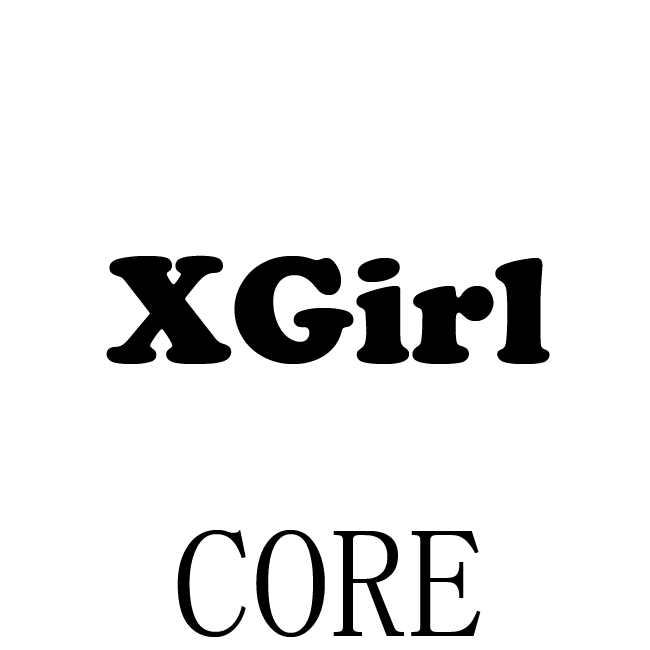
<style>
.page{position:relative;width:650px;height:650px;background:#ffffff}
.page>*{position:absolute;margin:0}
.t1{font:156px "CooperBlack";color:#000000}
.t2{font:156px "SimSun";color:#000000}
</style>
<div class="page">
<p class="t1" style="left:106px;top:255px;width:444px;height:382px;text-align:center">XGirl<br><span class="t2">CORE</span></p>
</div>
